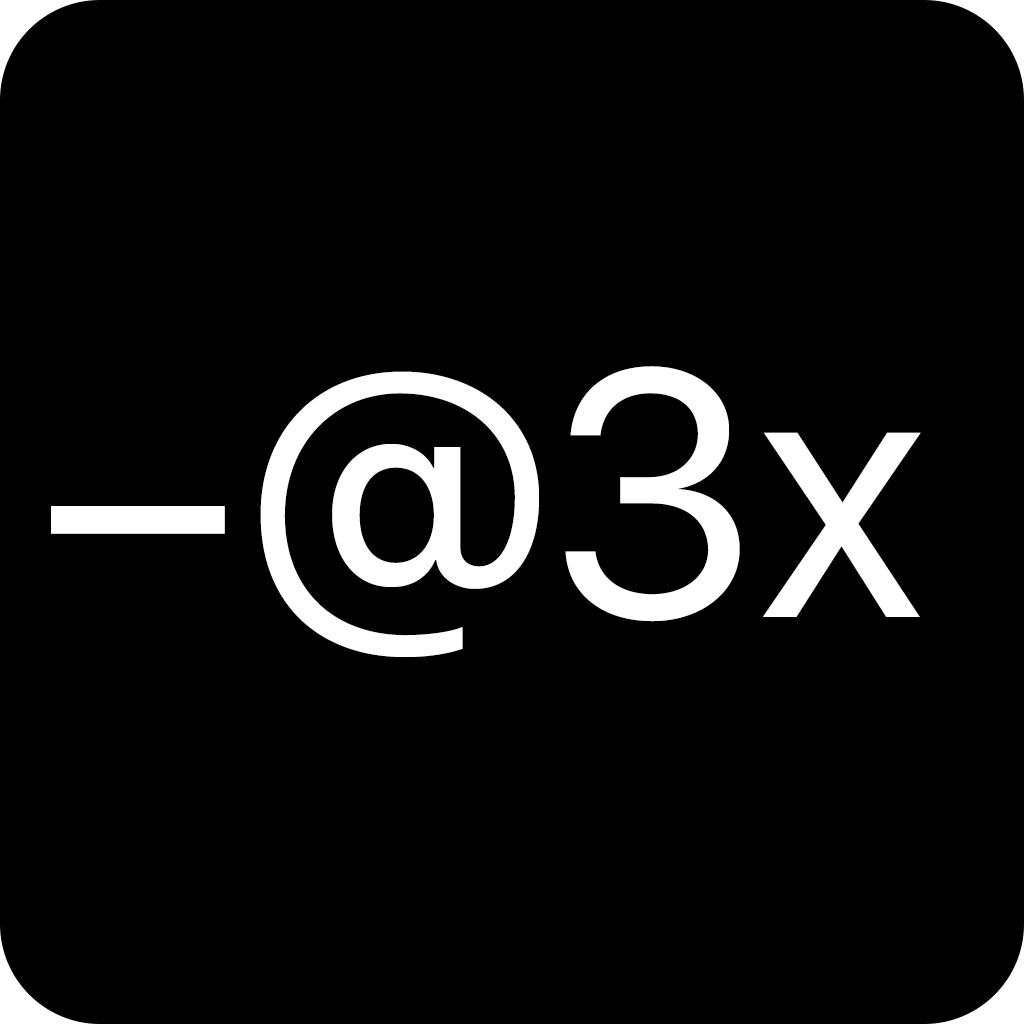
<style>
.page{position:relative;width:1024px;height:1024px;background:#000000}
.page>*{position:absolute;margin:0}
.t1{font:350px "SFUIDisplay-Regular";color:#ffffff}
</style>
<div class="page">
<p class="t1" style="left:51px;top:366px;width:870px;height:291px">−@3x</p>
</div>
